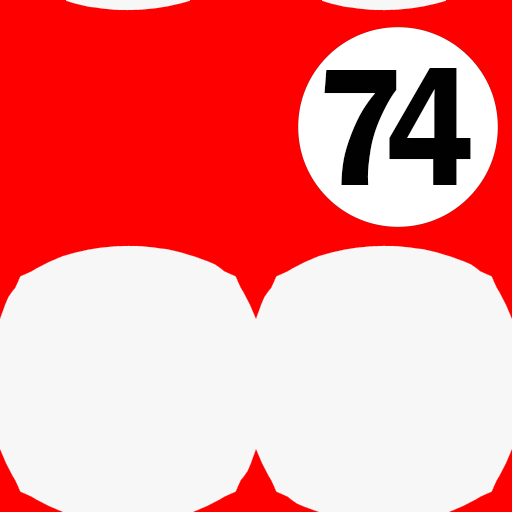
<style>
.page{position:relative;width:512px;height:512px;background:#f7f7f7}
.page>*{position:absolute;margin:0}
.t1{font:172.5px "FranklinGothic-Demi";letter-spacing:-0.05em;color:#010101;scale:0.87 1}
</style>
<div class="page">
<p class="t1" style="left:324px;top:68px;width:147px;height:117px">74</p>
</div>
